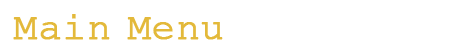
<style>
.page{position:relative;width:470px;height:53px;background:#ffffff}
.page>*{position:absolute;margin:0}
.t1{font:38.9px "CourierNewPSMT";color:#e3b93a;font-weight:bold}
</style>
<div class="page">
<p class="t1" style="left:13px;top:14px;width:210px;height:26px">Main Menu</p>
</div>
